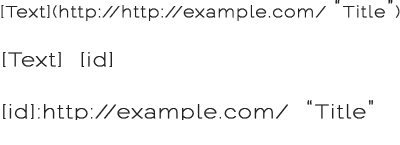
<style>
.page{position:relative;width:400px;height:145px;background:#ffffff}
.page>*{position:absolute;margin:0}
.t1{font:16px "Raleway-Thin";letter-spacing:0.05em;color:#222222;font-weight:bold;scale:1.2 1}
.t2{font:23px "Raleway-Thin";letter-spacing:0.05em;color:#222222;font-weight:bold;scale:1.2 1}
.t3{font:19.2px "Raleway-Thin";letter-spacing:0.05em;color:#222222;font-weight:bold;scale:1.2 1}
.t4{font:24.3px "Raleway-Thin";letter-spacing:0.05em;color:#222222;font-weight:bold;scale:1.2 1}
</style>
<div class="page">
<p class="t1" style="left:1px;top:0px;width:399px;height:21px">[Text](http://http://example.com/ <span class="t2">“</span>Title<span class="t2">”</span>)</p>
<p class="t3" style="left:3px;top:52px;width:371px;height:68px">[Text]  [id]<br><br>[id]:http://example.com/  <span class="t4">“</span>Title<span class="t4">”</span></p>
</div>
